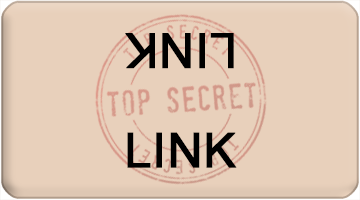
<style>
.page{position:relative;width:360px;height:200px;background:#e8d0bb}
.page>*{position:absolute;margin:0}
.t1{font:48px "ArialMT";color:#000000;font-weight:bold}
</style>
<div class="page">
<p class="t1" style="left:125px;top:33px;width:109px;height:36px;rotate:180deg">LINK</p>
<p class="t1" style="left:127px;top:132px;width:110px;height:36px">LINK</p>
</div>
